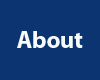
<style>
.page{position:relative;width:100px;height:80px;background:#0c3471}
.page>*{position:absolute;margin:0}
.t1{font:24px "MyriadPro-Bold";color:#f7fcfa}
</style>
<div class="page">
<p class="t1" style="left:17px;top:31px;width:66px;height:17px">About</p>
</div>
